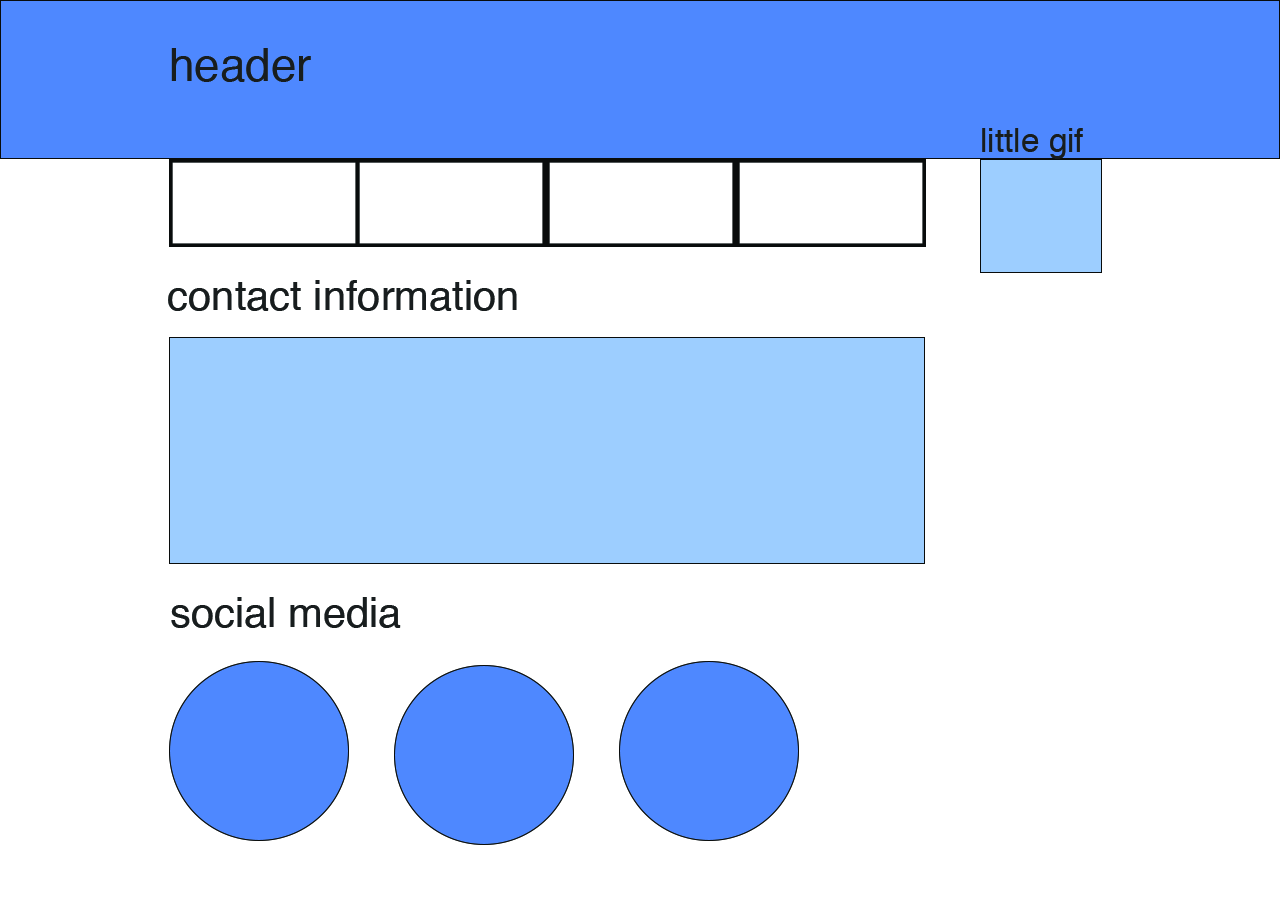
<style>
.page{position:relative;width:1280px;height:900px;background:#ffffff}
.page>*{position:absolute;margin:0}
.t1{font:45.8px "Helvetica";color:#181d1e}
.t2{font:33.3px "Helvetica";color:#181d1e}
.t3{font:41.7px "Helvetica";color:#181d1e}
</style>
<div class="page">
<p class="t1" style="left:171px;top:48px;width:140px;height:34px">header</p>
<p class="t2" style="left:982px;top:128px;width:101px;height:31px">little gif</p>
<p class="t3" style="left:168px;top:280px;width:349px;height:31px">contact information</p>
<p class="t3" style="left:171px;top:597px;width:230px;height:31px">social media</p>
</div>
